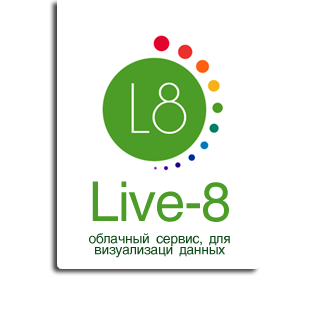
<style>
.page{position:relative;width:317px;height:331px;background:#ffffff}
.page>*{position:absolute;margin:0}
.t1{font:55px "AGHelvetica";letter-spacing:-0.025em;color:#4c9d27}
.t2{font:14px/11px "AGHelvetica";letter-spacing:-0.025em;color:#0c4a17}
</style>
<div class="page">
<p class="t1" style="left:92px;top:181px;width:137px;height:41px">Live-8</p>
<p class="t2" style="left:89px;top:233px;width:141px;height:25px;text-align:center">облачный сервис, для<br>визуализаци данных</p>
</div>
